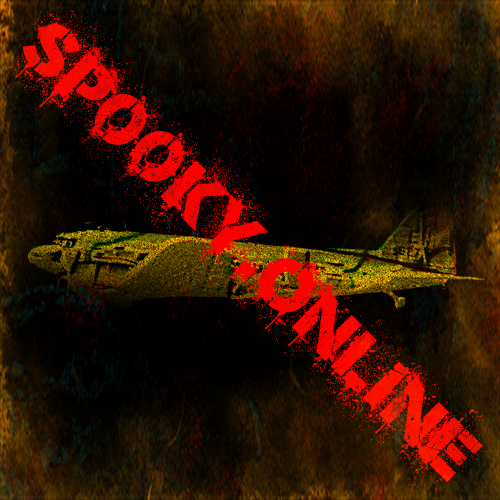
<style>
.page{position:relative;width:500px;height:500px}
.page>*{position:absolute;margin:0}
.t1{font:72px "WorldConflict-Regular";color:#ff0000}
</style>
<div class="page">
<p class="t1" style="left:3px;top:5px;width:495px;height:491px;rotate:45deg">SP00KY.ONLINE</p>
</div>
